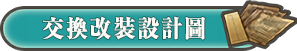
<style>
.page{position:relative;width:297px;height:51px}
.page>*{position:absolute;margin:0}
.t1{font:24px "RyuminPr6N-ExBold";letter-spacing:0.075em;color:#ffffff;font-weight:bold;scale:0.9 1}
</style>
<div class="page">
<p class="t1" style="left:43px;top:16px;width:162px;height:24px">交換改裝設計圖</p>
</div>
